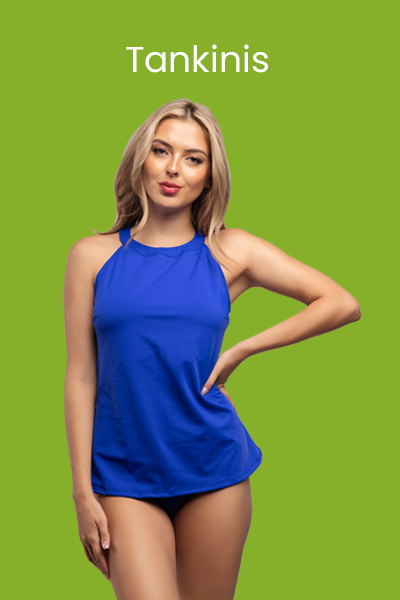
<style>
.page{position:relative;width:400px;height:600px;background:#86b029}
.page>*{position:absolute;margin:0}
.t1{font:36px "Poppins-Regular";color:#ffffff}
</style>
<div class="page">
<p class="t1" style="left:126px;top:44px;width:142px;height:29px">Tankinis</p>
</div>
